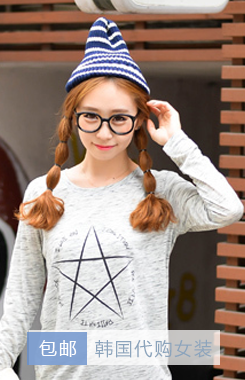
<style>
.page{position:relative;width:245px;height:380px}
.page>*{position:absolute;margin:0}
.t1{font:18px "MicrosoftYaHei";letter-spacing:0.1em;color:#ffffff}
.t2{font:18px "MicrosoftYaHei";letter-spacing:0.1em;color:#8ca4bc}
</style>
<div class="page">
<p class="t1" style="left:39px;top:340px;width:38px;height:17px">包邮</p>
<p class="t2" style="left:95px;top:339px;width:117px;height:19px">韩国代购女装</p>
</div>
